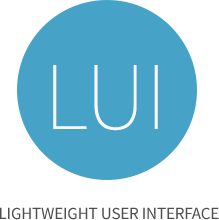
<style>
.page{position:relative;width:219px;height:220px;background:#47a2c8}
.page>*{position:absolute;margin:0}
.t1{font:97px "SourceSansPro-ExtraLight";letter-spacing:-0.01em;color:#f9f9f9}
.t2{font:17px "SourceSansPro-Regular";letter-spacing:-0.01em;color:#4f4f4f;text-transform:uppercase}
</style>
<div class="page">
<p class="t1" style="left:53px;top:65px;width:105px;height:66px">LUI</p>
<p class="t2" style="left:0px;top:207px;width:219px;height:13px">Lightweight User Interface</p>
</div>
